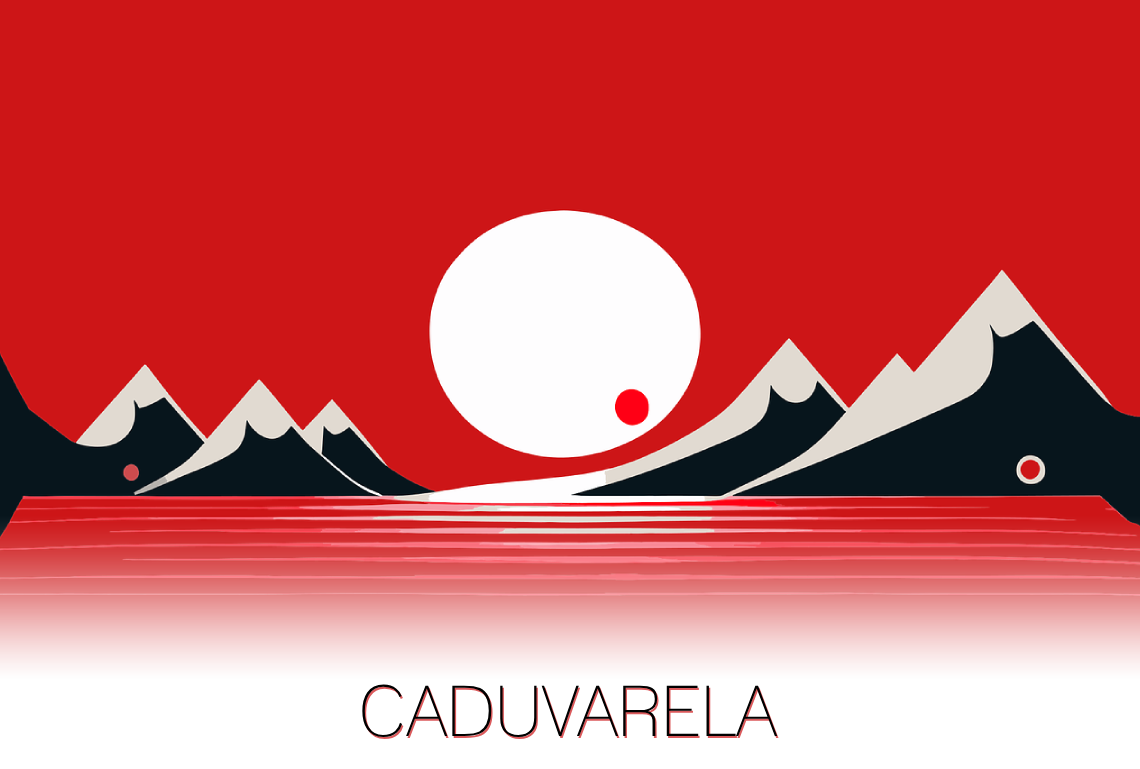
<style>
.page{position:relative;width:1140px;height:769px;background:#cd1517}
.page>*{position:absolute;margin:0}
.t1{font:70px "Lane-Narrow";color:#000000}
.t2{font:70px "Lane-Narrow"}
</style>
<div class="page">
<p class="t1" style="left:362px;top:684px;width:416px;height:54px">CADUVARELA</p>
<p class="t2" style="left:363px;top:686px;width:416px;height:54px">CADUVARELA</p>
</div>
